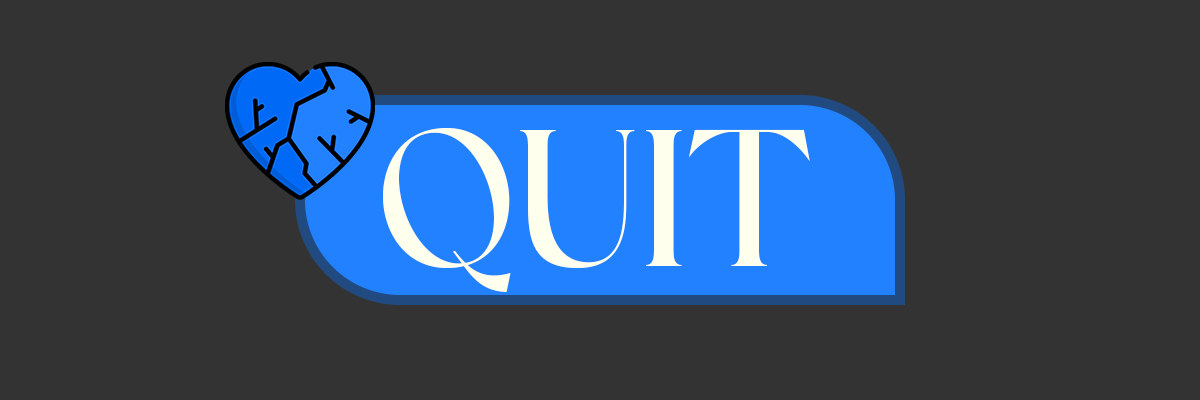
<style>
.page{position:relative;width:1200px;height:400px;background:#333333}
.page>*{position:absolute;margin:0}
.t1{font:195px "BelganAesthetic-Regular";color:#ffffed}
</style>
<div class="page">
<p class="t1" style="left:383px;top:127px;width:427px;height:165px">QUIT</p>
</div>
